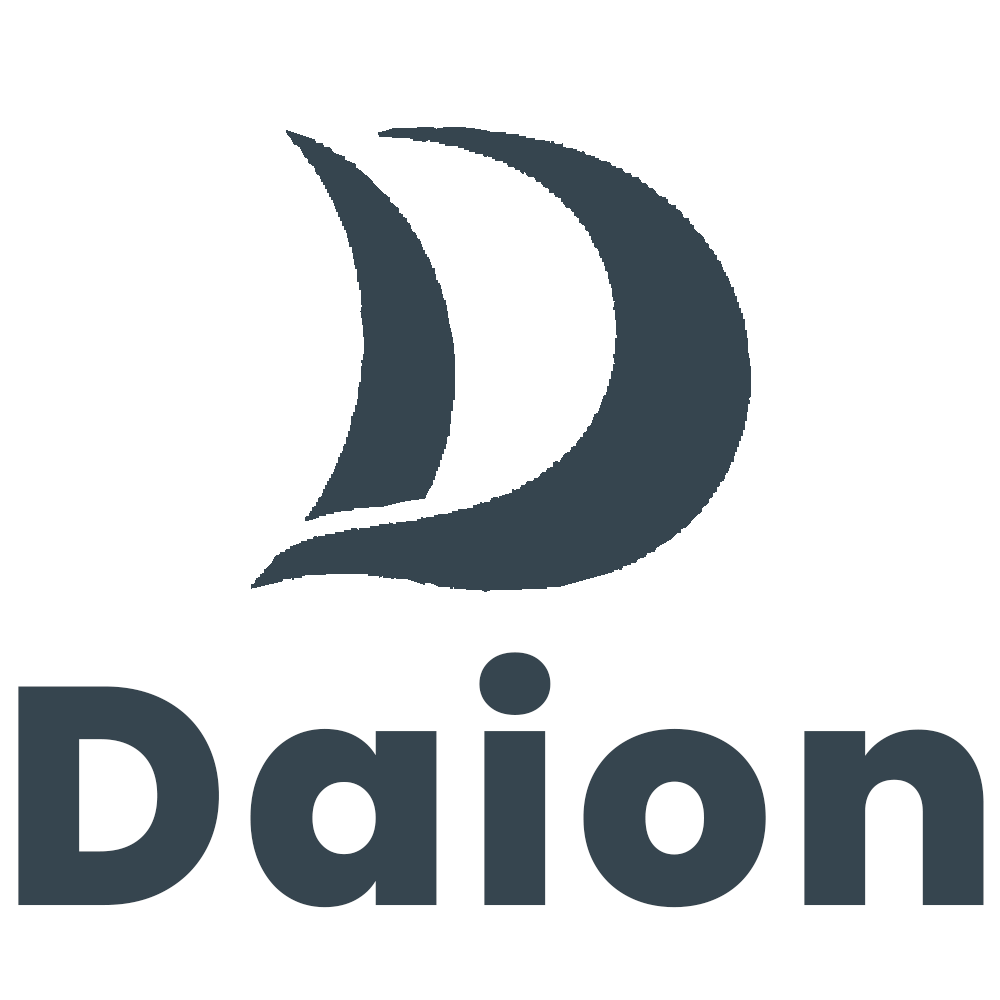
<style>
.page{position:relative;width:1000px;height:1000px;background:#ffffff}
.page>*{position:absolute;margin:0}
.t1{font:310px "Poppins-ExtraBold";letter-spacing:0.05em;color:#36454f}
</style>
<div class="page">
<p class="t1" style="left:18px;top:652px;width:966px;height:256px">Daion</p>
</div>
